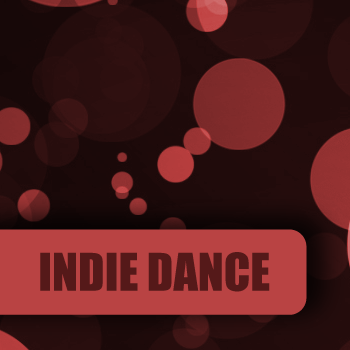
<style>
.page{position:relative;width:350px;height:350px}
.page>*{position:absolute;margin:0}
.t1{font:48px "Impact";color:#551919}
</style>
<div class="page">
<p class="t1" style="left:40px;top:252px;width:230px;height:40px">INDIE DANCE</p>
</div>
